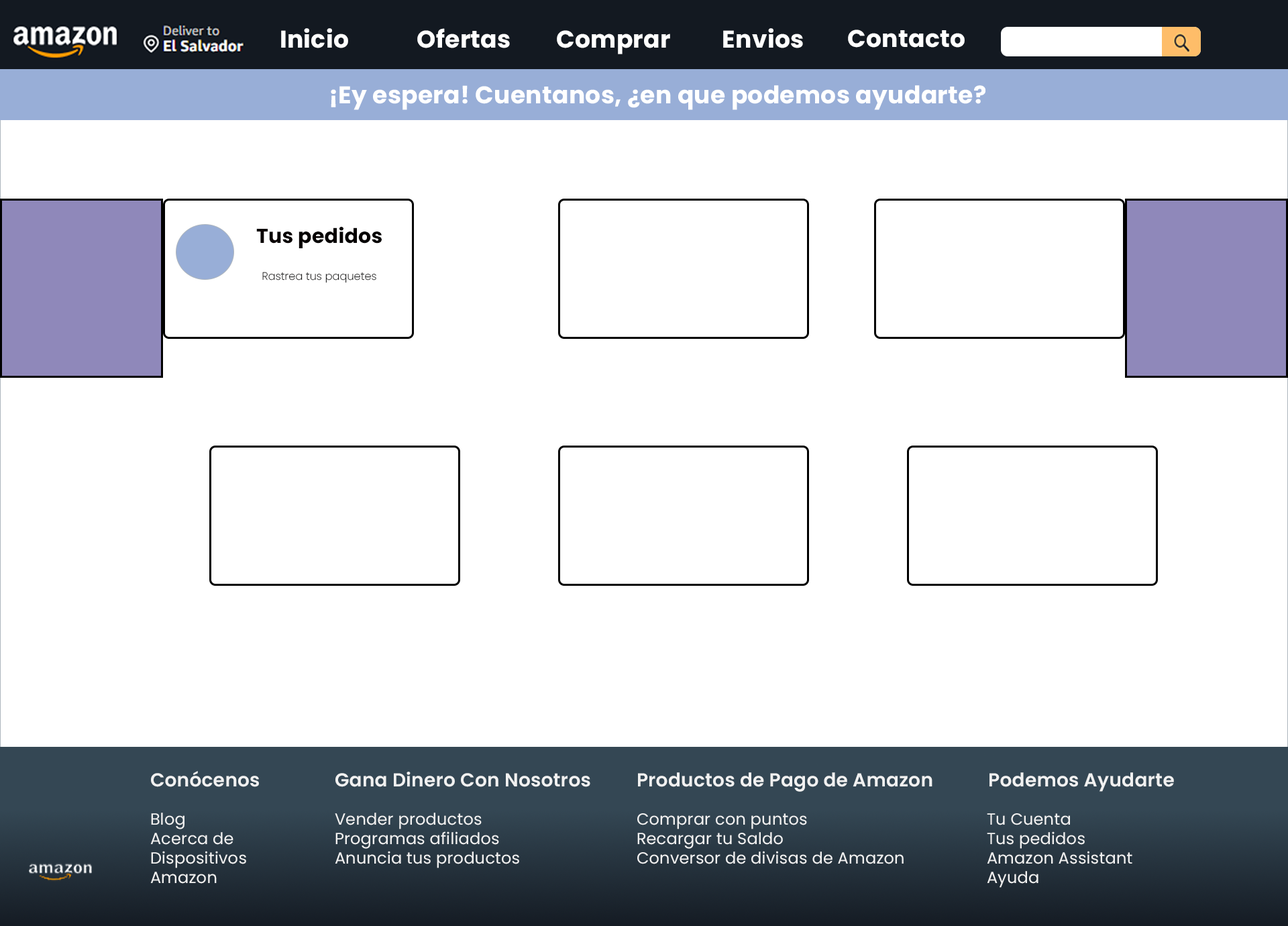
<style>
.page{position:relative;width:1288px;height:926px;background:#ffffff}
.page>*{position:absolute;margin:0}
.t1{font:24.1px "Poppins-Bold";letter-spacing:0.01em;color:#ffffff}
.t2{font:24.2px "Poppins-Bold";letter-spacing:0.01em;color:#ffffff}
.t3{font:10.7px "Poppins-ExtraLight";letter-spacing:0.01em;color:#050000}
.t4{font:20.1px "Poppins-Bold";letter-spacing:0.01em;color:#0a0101}
.t5{font:20.1px "Poppins-Bold";letter-spacing:0.01em;color:#050000}
.t6{font:16.1px "Poppins-Regular";letter-spacing:0.01em;color:#f1f1f1}
.t7{font:18.8px "Poppins-SemiBold";letter-spacing:0.01em;color:#f1f1f1}
</style>
<div class="page">
<p class="t1" style="left:281px;top:28px;width:67px;height:20px">Inicio</p>
<p class="t1" style="left:417px;top:28px;width:93px;height:20px">Ofertas</p>
<p class="t1" style="left:723px;top:28px;width:80px;height:20px">Envios</p>
<p class="t1" style="left:848px;top:30px;width:117px;height:18px">Contacto</p>
<p class="t1" style="left:557px;top:30px;width:113px;height:24px">Comprar</p>
<p class="t2" style="left:331px;top:85px;width:654px;height:25px">¡Ey espera! Cuentanos, ¿en que podemos ayudarte?</p>
<p class="t3" style="left:256px;top:227px;width:126px;height:56px;text-align:center"><span class="t4">Tus </span><span class="t5">pedidos<br><br></span>Rastrea tus paquetes</p>
<p class="t6" style="left:150px;top:771px;width:109px;height:113px"><span class="t7">Conócenos<br><br></span>Blog<br>Acerca de<br>Dispositivos      Amazon</p>
<p class="t6" style="left:335px;top:771px;width:255px;height:97px"><span class="t7">Gana Dinero Con Nosotros<br><br></span>Vender productos<br>Programas afiliados<br>Anuncia tus productos</p>
<p class="t6" style="left:637px;top:772px;width:295px;height:92px"><span class="t7">Productos de Pago de Amazon<br><br></span>Comprar con puntos<br>Recargar tu Saldo<br>Conversor de divisas de Amazon</p>
<p class="t6" style="left:987px;top:772px;width:187px;height:116px;text-align:center"><span class="t7">Podemos Ayudarte<br></span><br>Tu Cuenta<br>Tus pedidos<br>Amazon Assistant<br>Ayuda</p>
</div>
